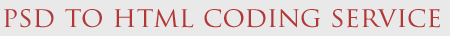
<style>
.page{position:relative;width:450px;height:36px;background:#e9e9e9}
.page>*{position:absolute;margin:0}
.t1{font:28px "TrajanPro-Regular";color:#b33737}
</style>
<div class="page">
<p class="t1" style="left:4px;top:9px;width:436px;height:19px">psd to html coding service</p>
</div>
